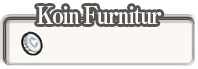
<style>
.page{position:relative;width:198px;height:69px;background:#fbf8f3}
.page>*{position:absolute;margin:0}
.t1{font:24px "RyuminPro-ExBold";letter-spacing:-0.08em;color:#fbfbf9;scale:0.9 1}
</style>
<div class="page">
<p class="t1" style="left:37px;top:6px;width:125px;height:18px">Koin Furnitur</p>
</div>
